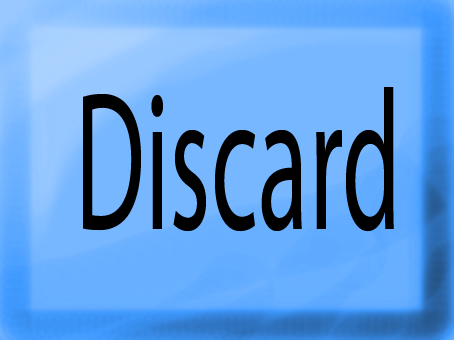
<style>
.page{position:relative;width:454px;height:340px;background:#76b7ff}
.page>*{position:absolute;margin:0}
.t1{font:199.5px "MyriadPro-Regular";color:#000000;scale:0.53 1}
</style>
<div class="page">
<p class="t1" style="left:83px;top:87px;width:311px;height:145px">Discard</p>
</div>
